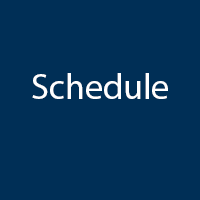
<style>
.page{position:relative;width:200px;height:200px;background:#002f56}
.page>*{position:absolute;margin:0}
.t1{font:36px "MyriadPro-Regular";color:#ffffff}
</style>
<div class="page">
<p class="t1" style="left:32px;top:73px;width:136px;height:26px">Schedule</p>
</div>
